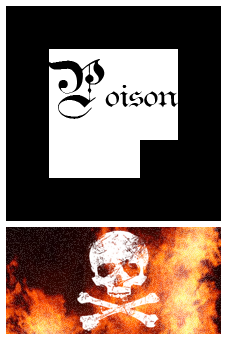
<style>
.page{position:relative;width:227px;height:340px;background:#000000}
.page>*{position:absolute;margin:0}
.t1{font:30px "TeutonicNo1-DemiBold";color:#000000}
.t2{font:60px "TeutonicNo1-DemiBold";color:#000000}
</style>
<div class="page">
<p class="t1" style="left:47px;top:59px;width:131px;height:60px"><span class="t2">P</span>oison</p>
</div>
